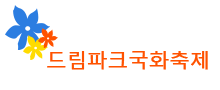
<style>
.page{position:relative;width:220px;height:90px;background:#ffffff}
.page>*{position:absolute;margin:0}
.t1{font:20px "MalgunGothicRegular";color:#ff5200;font-weight:bold}
</style>
<div class="page">
<p class="t1" style="left:47px;top:51px;width:161px;height:19px">드림파크국화축제</p>
</div>
